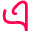
<style>
.page{position:relative;width:32px;height:32px;background:#ffffff}
.page>*{position:absolute;margin:0}
.t1{font:53.3px "FreeSans";color:#ff014f}
</style>
<div class="page">
<p class="t1" style="left:2px;top:0px;width:26px;height:31px">এ</p>
</div>
